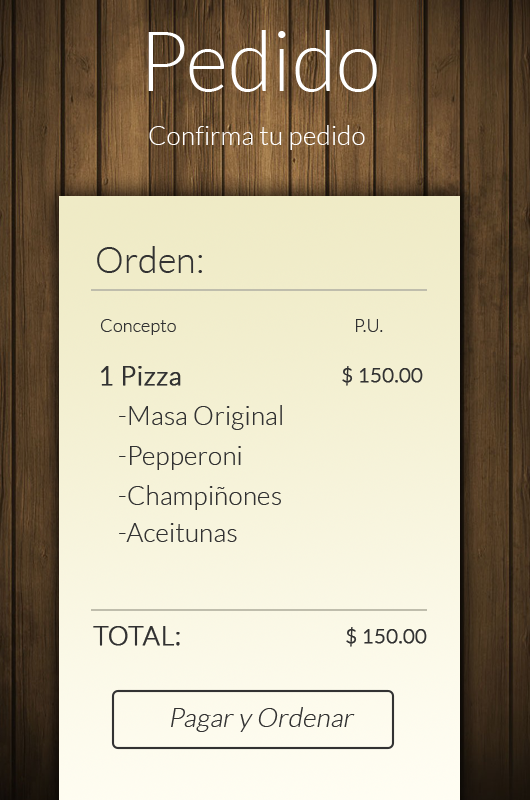
<style>
.page{position:relative;width:530px;height:800px}
.page>*{position:absolute;margin:0}
.t1{font:83.7px "Lato-Light";color:#ffffff}
.t2{font:26.9px "Lato-Light";color:#ffffff}
.t3{font:36.5px "Lato-Light";color:#323232}
.t4{font:18.3px "Lato-Light";color:#323232}
.t5{font:26.9px "Lato-Light";color:#323232;font-weight:bold}
.t6{font:20.2px "Lato-Light";color:#323232;font-weight:bold}
.t7{font:26.9px "Lato-Light";color:#323232}
.t8{font:26.9px "Lato-Light";color:#323232;font-style:italic}
</style>
<div class="page">
<p class="t1" style="left:148px;top:30px;width:229px;height:62px">Pedido</p>
<p class="t2" style="left:149px;top:125px;width:216px;height:25px">Confirma tu pedido</p>
<p class="t3" style="left:97px;top:246px;width:105px;height:27px">Orden:</p>
<p class="t4" style="left:100px;top:319px;width:76px;height:16px">Concepto</p>
<p class="t4" style="left:356px;top:319px;width:27px;height:13px">P.U.</p>
<p class="t5" style="left:101px;top:366px;width:80px;height:20px">1 Pizza</p>
<p class="t6" style="left:342px;top:366px;width:81px;height:20px">$ 150.00</p>
<p class="t7" style="left:119px;top:405px;width:163px;height:25px">-Masa Original</p>
<p class="t7" style="left:119px;top:446px;width:122px;height:24px">-Pepperoni</p>
<p class="t7" style="left:119px;top:485px;width:162px;height:25px">-Champiñones</p>
<p class="t7" style="left:119px;top:523px;width:118px;height:19px">-Aceitunas</p>
<p class="t5" style="left:93px;top:626px;width:87px;height:20px">TOTAL:</p>
<p class="t6" style="left:346px;top:627px;width:81px;height:20px">$ 150.00</p>
<p class="t8" style="left:171px;top:707px;width:184px;height:25px">Pagar y Ordenar</p>
</div>
